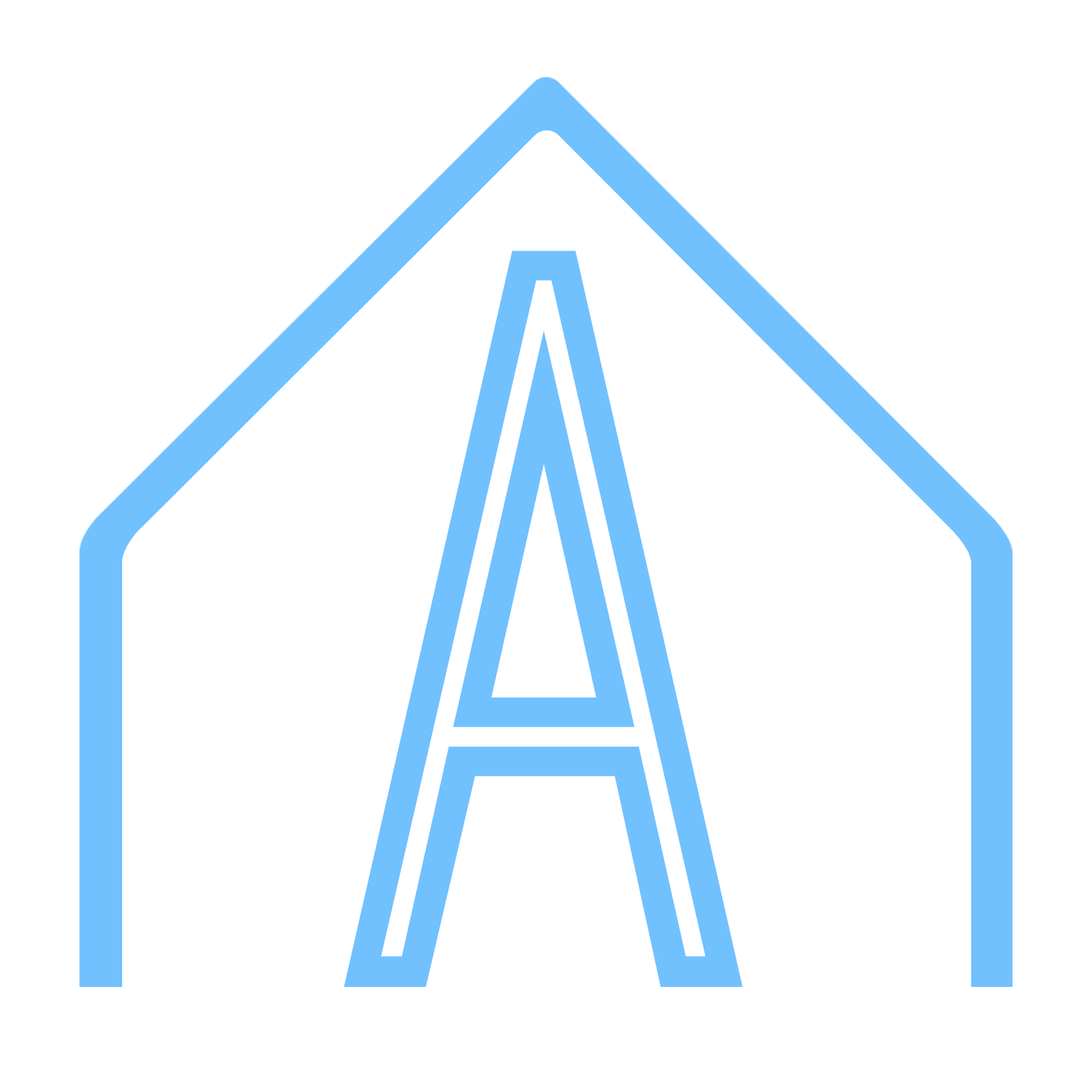
<style>
.page{position:relative;width:1092px;height:1092px;background:#ffffff}
.page>*{position:absolute;margin:0}
.t1{font:1092px "OstrichSansInline";color:#71c1ff}
</style>
<div class="page">
<p class="t1" style="left:344px;top:250px;width:399px;height:737px">A</p>
</div>
